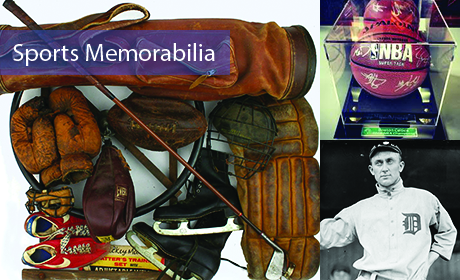
<style>
.page{position:relative;width:460px;height:280px}
.page>*{position:absolute;margin:0}
.t1{font:25px "MyriadPro-Regular";color:#fefeff}
</style>
<div class="page">
<p class="t1" style="left:13px;top:43px;width:202px;height:23px">Sports Memorabilia</p>
</div>
